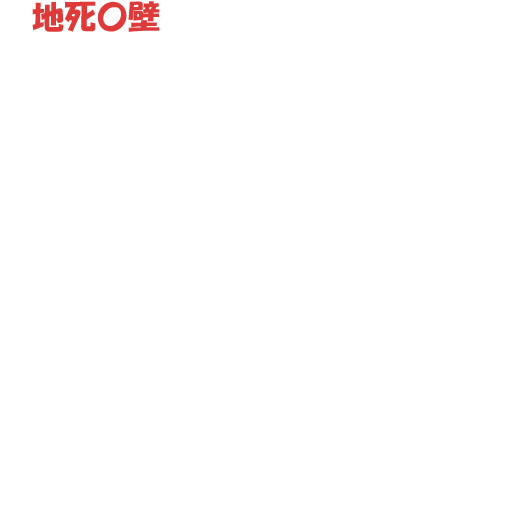
<style>
.page{position:relative;width:512px;height:512px;background:#ffffff}
.page>*{position:absolute;margin:0}
.t1{font:32px "HGSoeiKakupoptai";color:#de3a3a}
</style>
<div class="page">
<p class="t1" style="left:32px;top:2px;width:32px;height:30px">地</p>
<p class="t1" style="left:65px;top:1px;width:31px;height:31px">死</p>
<p class="t1" style="left:97px;top:1px;width:30px;height:31px">〇</p>
<p class="t1" style="left:128px;top:1px;width:32px;height:31px">壁</p>
</div>
